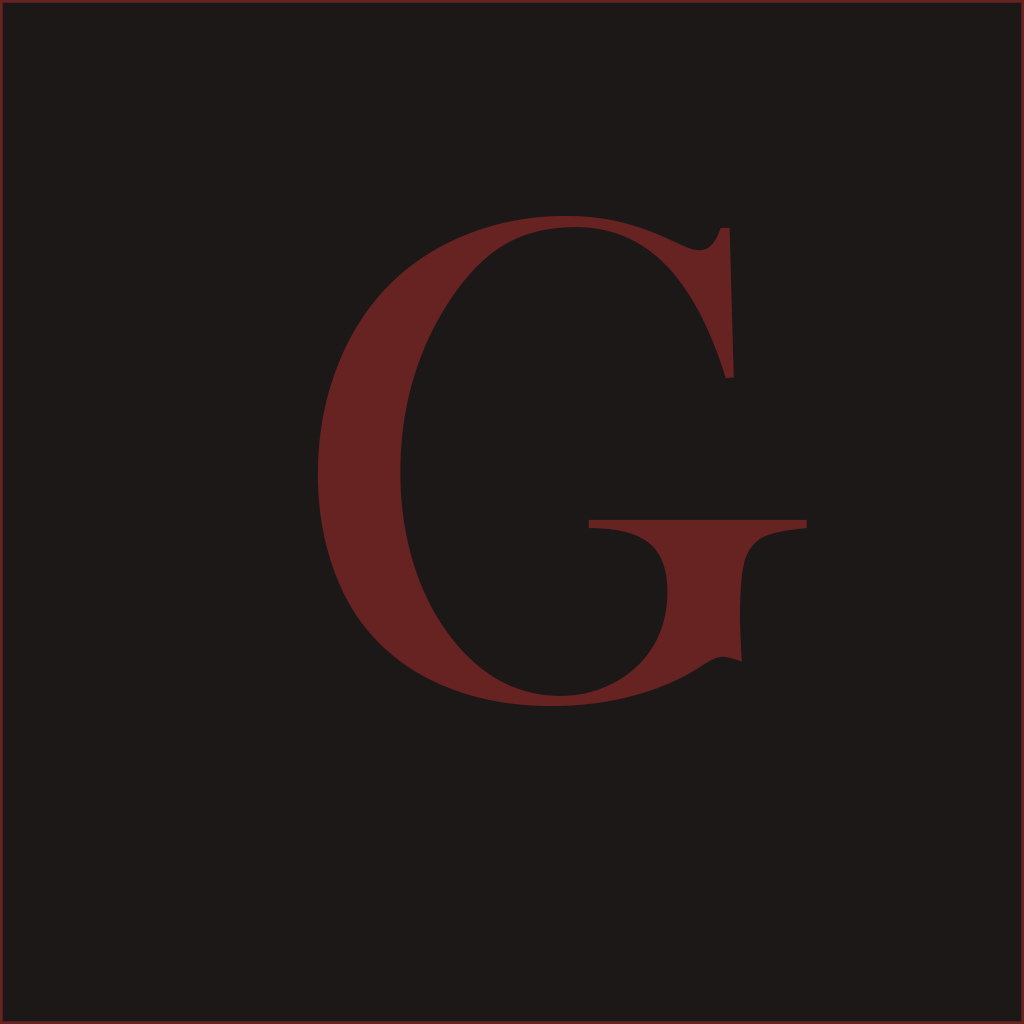
<style>
.page{position:relative;width:1024px;height:1024px;background:#1c1818}
.page>*{position:absolute;margin:0}
.t1{font:700px "BaskOldFace";color:#672222}
</style>
<div class="page">
<p class="t1" style="left:317px;top:215px;width:490px;height:491px">G</p>
</div>
